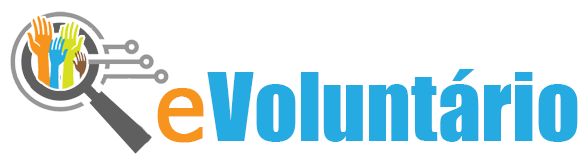
<style>
.page{position:relative;width:588px;height:163px;background:#ffffff}
.page>*{position:absolute;margin:0}
.t1{font:87.2px "Impact";color:#25aae1}
.t2{font:93.4px "Tahoma";color:#f7941e;font-weight:bold}
</style>
<div class="page">
<p class="t1" style="left:207px;top:69px;width:371px;height:73px">Voluntário</p>
<p class="t2" style="left:157px;top:88px;width:47px;height:55px">e</p>
</div>
